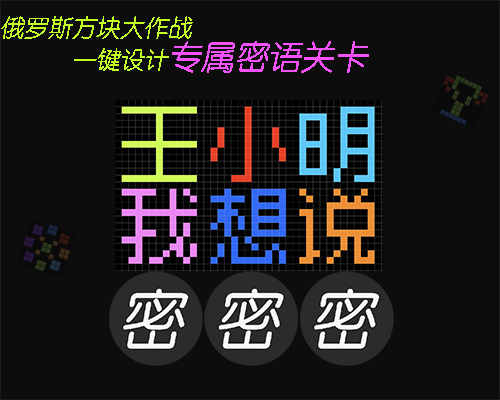
<style>
.page{position:relative;width:500px;height:400px;background:#0d0d0d}
.page>*{position:absolute;margin:0}
.t1{font:24px/24px "STYuanti-SC-Regular";color:#c2fd25;font-style:italic}
.t2{font:33.3px/24px "STYuanti-SC-Regular";color:#f552fb;font-style:italic}
</style>
<div class="page">
<p class="t1" style="left:1px;top:16px;width:368px;height:57px">俄罗斯方块大作战 <br>            一键设计<span class="t2">专属密语关卡</span></p>
</div>
